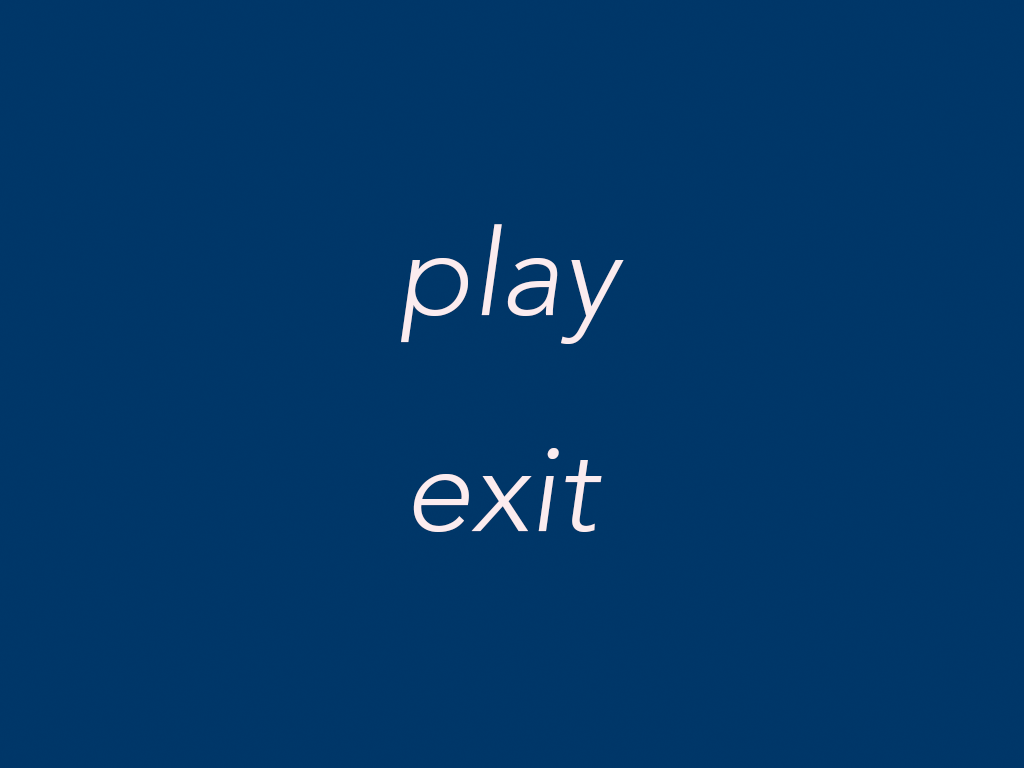
<style>
.page{position:relative;width:1024px;height:768px;background:#003668}
.page>*{position:absolute;margin:0}
.t1{font:120px "Avenir-LightOblique";color:#fbecef}
</style>
<div class="page">
<p class="t1" style="left:401px;top:224px;width:223px;height:120px">play</p>
<p class="t1" style="left:413px;top:448px;width:189px;height:84px">exit</p>
</div>
